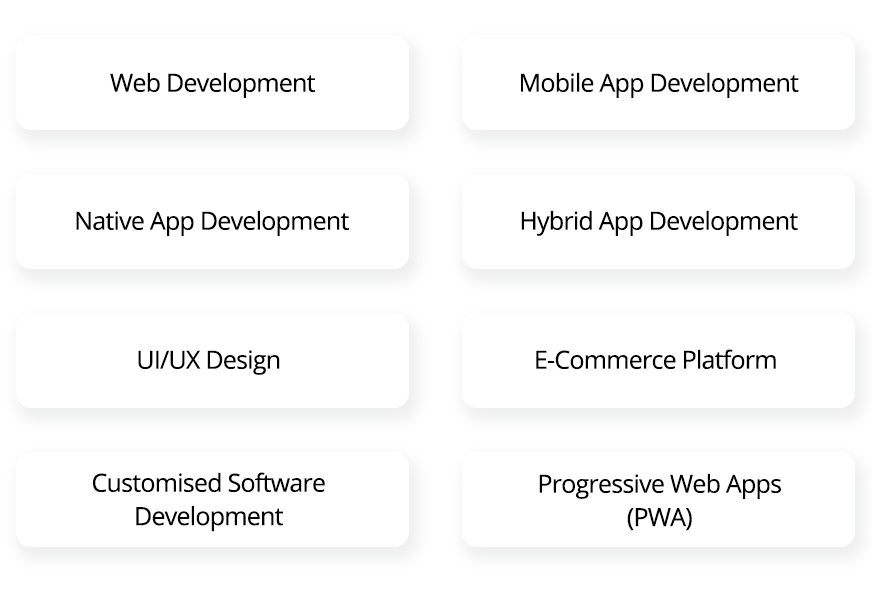
<style>
.page{position:relative;width:872px;height:605px;background:#ffffff}
.page>*{position:absolute;margin:0}
.t1{font:25px "OpenSans";letter-spacing:-0.03em;color:#000000}
.t2{font:25px/33.3px "OpenSans";letter-spacing:-0.03em;color:#000000}
</style>
<div class="page">
<p class="t1" style="left:110px;top:72px;width:205px;height:26px">Web Development</p>
<p class="t1" style="left:521px;top:72px;width:278px;height:26px">Mobile App Development</p>
<p class="t1" style="left:76px;top:210px;width:273px;height:26px">Native App Development</p>
<p class="t1" style="left:521px;top:210px;width:277px;height:26px">Hybrid App Development</p>
<p class="t1" style="left:138px;top:350px;width:142px;height:25px">UI/UX Design</p>
<p class="t1" style="left:536px;top:349px;width:240px;height:20px">E-Commerce Platform</p>
<p class="t2" style="left:93px;top:472px;width:232px;height:60px;text-align:center">Customised Software<br>Development</p>
<p class="t2" style="left:539px;top:473px;width:242px;height:58px;text-align:center">Progressive Web Apps<br>(PWA)</p>
</div>
